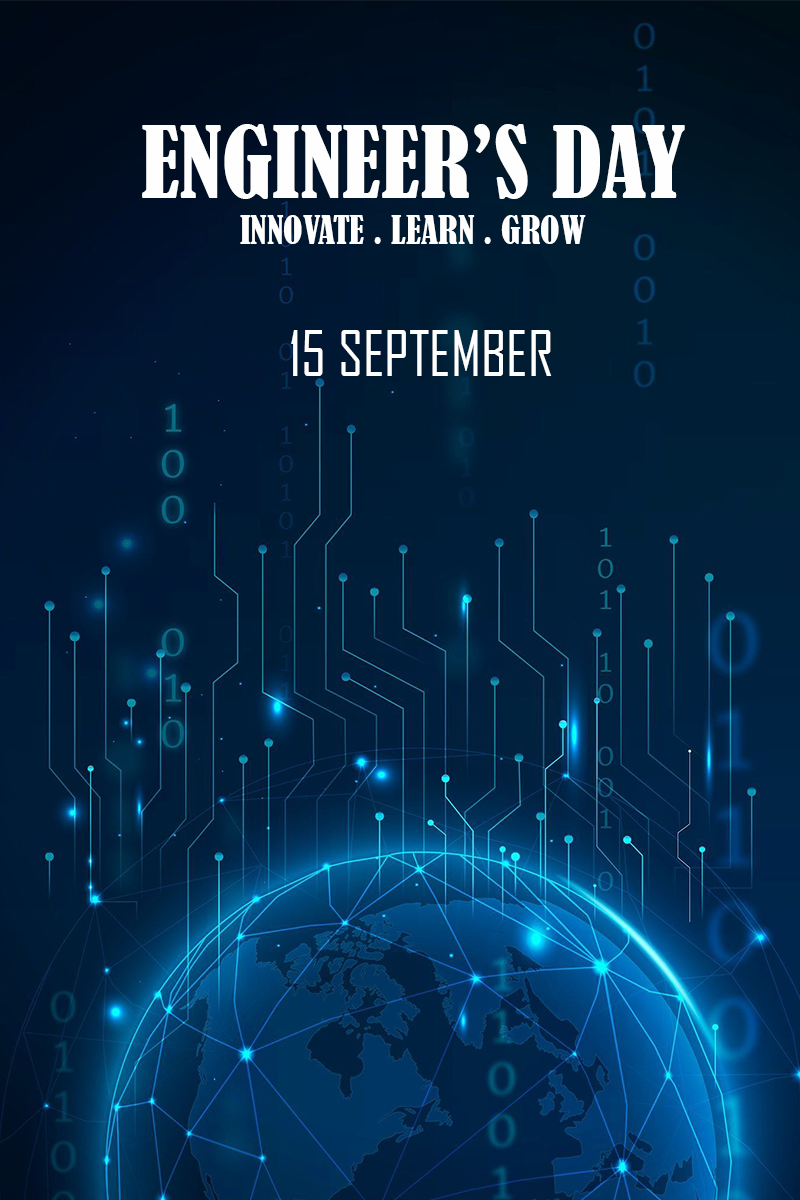
<style>
.page{position:relative;width:800px;height:1200px}
.page>*{position:absolute;margin:0}
.t1{font:93px "BernardMT-Condensed";color:#fefefe}
.t2{font:36px "BernardMT-Condensed";color:#fefefe}
.t3{font:60px "AgencyFB-Reg";color:#fefefe}
</style>
<div class="page">
<p class="t1" style="left:142px;top:124px;width:543px;height:75px">ENGINEER’S DAY</p>
<p class="t2" style="left:240px;top:215px;width:346px;height:29px">INNOVATE . LEARN . GROW</p>
<p class="t3" style="left:291px;top:330px;width:261px;height:46px">15 SEPTEMBER</p>
</div>
